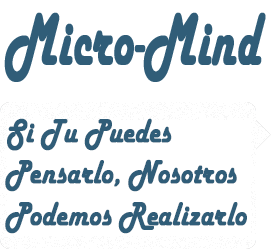
<style>
.page{position:relative;width:271px;height:249px;background:#ffffff}
.page>*{position:absolute;margin:0}
.t1{font:75.9px "HarlowSolid";color:#305d78;font-weight:bold;scale:0.63 1}
.t2{font:34.5px "HarlowSolid";color:#305d78;font-weight:bold;scale:0.81 1}
</style>
<div class="page">
<p class="t1" style="left:4px;top:12px;width:262px;height:70px">Micro-Mind</p>
<p class="t2" style="left:5px;top:118px;width:242px;height:116px">Si Tu Puedes <br>Pensarlo, Nosotros<br>Podemos Realizarlo</p>
</div>
